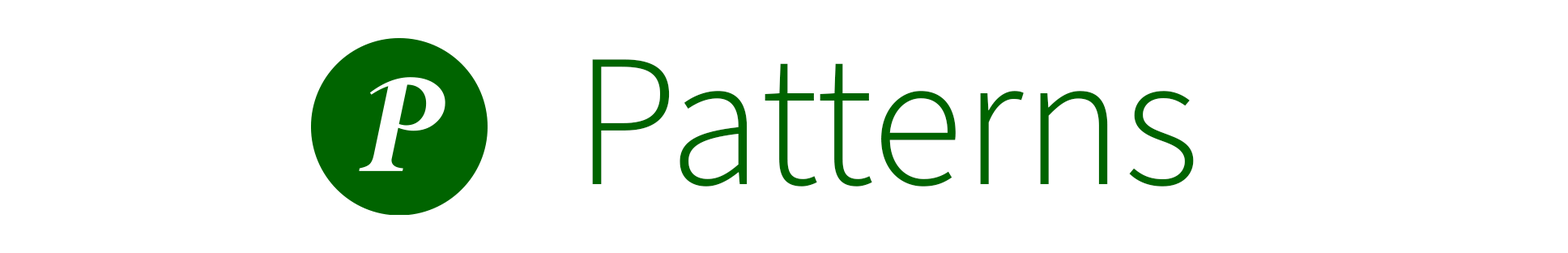
<style>
.page{position:relative;width:1568px;height:253px;background:#ffffff}
.page>*{position:absolute;margin:0}
.t1{font:188.9px "SourceSansRoman-Light";color:#006400}
</style>
<div class="page">
<p class="t1" style="left:592px;top:59px;width:602px;height:127px">Patterns</p>
</div>
